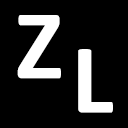
<style>
.page{position:relative;width:128px;height:128px;background:#000000}
.page>*{position:absolute;margin:0}
.t1{font:100px "Calibri-Bold";color:#ffffff}
</style>
<div class="page">
<p class="t1" style="left:17px;top:15px;width:44px;height:64px">Z</p>
<p class="t1" style="left:78px;top:49px;width:35px;height:64px">L</p>
</div>
